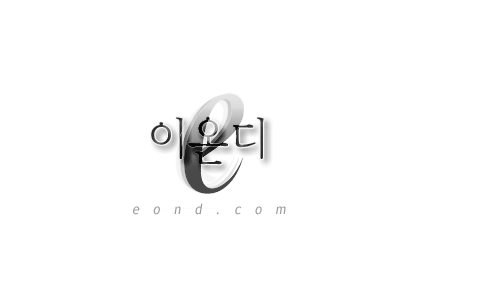
<style>
.page{position:relative;width:500px;height:300px;background:#ffffff}
.page>*{position:absolute;margin:0}
.t1{font:50px "YDIYMjO220";scale:0.9 1}
.t2{font:14px "TrebuchetMS";letter-spacing:1em;color:#9c9c9c;font-style:italic;scale:0.9 1}
</style>
<div class="page">
<p class="t1" style="left:151px;top:117px;width:113px;height:48px">이온디</p>
<p class="t1" style="left:151px;top:117px;width:113px;height:48px">이온디</p>
<p class="t1" style="left:151px;top:117px;width:113px;height:48px">이온디</p>
<p class="t1" style="left:151px;top:117px;width:113px;height:48px">이온디</p>
<p class="t2" style="left:133px;top:203px;width:153px;height:12px">eond.com</p>
</div>
